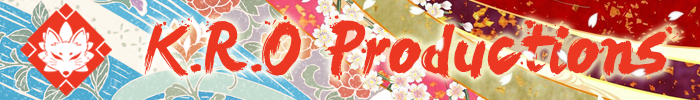
<style>
.page{position:relative;width:700px;height:100px}
.page>*{position:absolute;margin:0}
.t1{font:71.1px "LeviReBrushed";color:#ec3822}
</style>
<div class="page">
<p class="t1" style="left:325px;top:15px;width:354px;height:65px">Productions</p>
</div>
